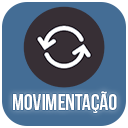
<style>
.page{position:relative;width:128px;height:128px;background:#446d95}
.page>*{position:absolute;margin:0}
.t1{font:22px "BebasNeue";color:#ffffff}
</style>
<div class="page">
<p class="t1" style="left:13px;top:91px;width:104px;height:22px">movimentação</p>
</div>
